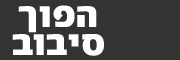
<style>
.page{position:relative;width:180px;height:60px;background:#333333}
.page>*{position:absolute;margin:0}
.t1{font:43.2px/27.6px "FbAlbatros-Black";color:#ffffff}
</style>
<div class="page">
<p class="t1" style="left:12px;top:5px;width:92px;height:51px;text-align:center">הפוך<br>סיבוב</p>
</div>
